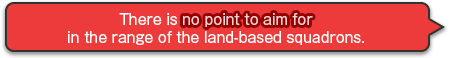
<style>
.page{position:relative;width:450px;height:58px;background:#ed3b3b}
.page>*{position:absolute;margin:0}
.t1{font:14px/18px "GothicMB101Pro-Regular";color:#ffffff}
.t2{font:14px/18px "GothicMB101Pro-Regular";color:#ffd3d3}
</style>
<div class="page">
<p class="t1" style="left:68px;top:13px;width:296px;height:32px;text-align:center">There is <span class="t2">no point to aim for<br></span>in the range of the land-based squadrons.</p>
<p class="t1" style="left:68px;top:13px;width:296px;height:32px;text-align:center">There is <span class="t2">no point to aim for<br></span>in the range of the land-based squadrons.</p>
</div>
